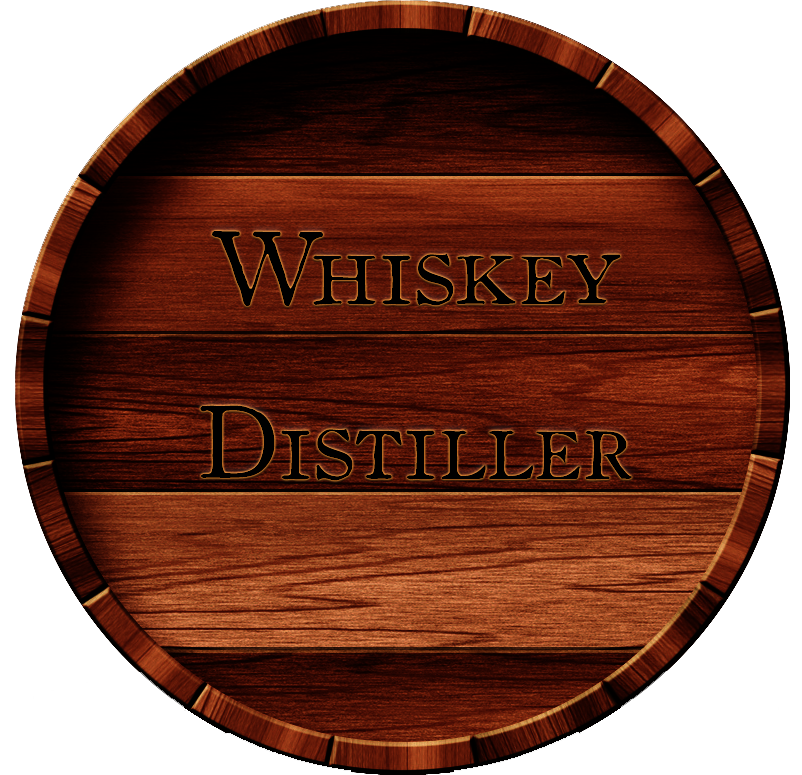
<style>
.page{position:relative;width:802px;height:775px;background:#ffffff}
.page>*{position:absolute;margin:0}
.t1{font:100px "OldstyleSmallCapsHPLHS";color:#000000}
</style>
<div class="page">
<p class="t1" style="left:200px;top:231px;width:432px;height:250px;text-align:center">Whiskey<br>Distiller</p>
</div>
